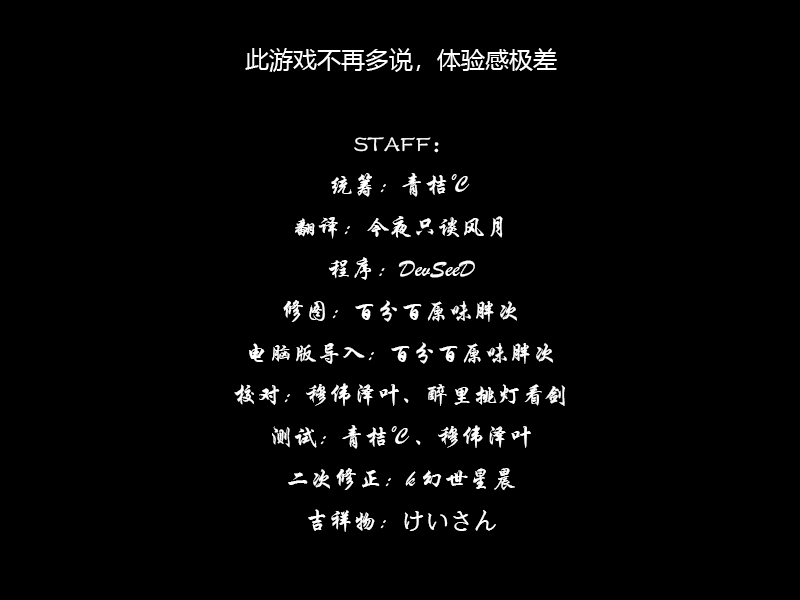
<style>
.page{position:relative;width:800px;height:600px;background:#000000}
.page>*{position:absolute;margin:0}
.t1{font:24px "STXingkai";color:#ffffff}
.t2{font:24px "MicrosoftYaHei";color:#ffffff}
.t3{font:24px "FZSTK--GBK1-0";color:#ffffff}
</style>
<div class="page">
<p class="t1" style="left:234px;top:48px;width:331px;height:484px;text-align:center"><span class="t2">此游戏不再多说，体验感极差<br><br></span><span class="t3">STAFF：<br></span>统筹：青桔℃<br>翻译：今夜只谈风月<br>程序：DevSeeD<br>修图：百分百原味胖次<br>电脑版导入：百分百原味胖次<br>校对：穆伟泽叶、醉里挑灯看剑<br>测试：青桔℃、穆伟泽叶<br>二次修正：k幻世星晨<br>吉祥物：けいさん</p>
</div>
